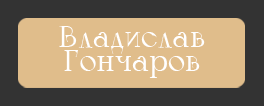
<style>
.page{position:relative;width:264px;height:106px;background:#e0bd8b}
.page>*{position:absolute;margin:0}
.t1{font:30px/24px "Calypso-Regular";color:#ffffff}
</style>
<div class="page">
<p class="t1" style="left:59px;top:26px;width:146px;height:52px;text-align:center">Владислав<br>Гончаров</p>
</div>
